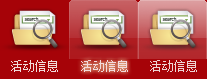
<style>
.page{position:relative;width:207px;height:79px;background:#a60308}
.page>*{position:absolute;margin:0}
.t1{font:12px "NSimSun";color:#f2dadb}
.t2{font:12px "NSimSun";color:#efd3d4}
</style>
<div class="page">
<p class="t1" style="left:11px;top:60px;width:47px;height:12px">活动信息</p>
<p class="t1" style="left:81px;top:60px;width:47px;height:12px">活动信息</p>
<p class="t2" style="left:150px;top:60px;width:47px;height:12px">活动信息</p>
</div>
